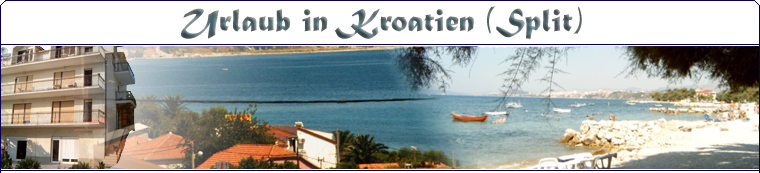
<style>
.page{position:relative;width:760px;height:173px;background:#ffffff}
.page>*{position:absolute;margin:0}
.t1{font:33.3px "MaturaMTScriptCapitals"}
</style>
<div class="page">
<p class="t1" style="left:181px;top:6px;width:401px;height:33px">Urlaub in Kroatien (Split)</p>
</div>
